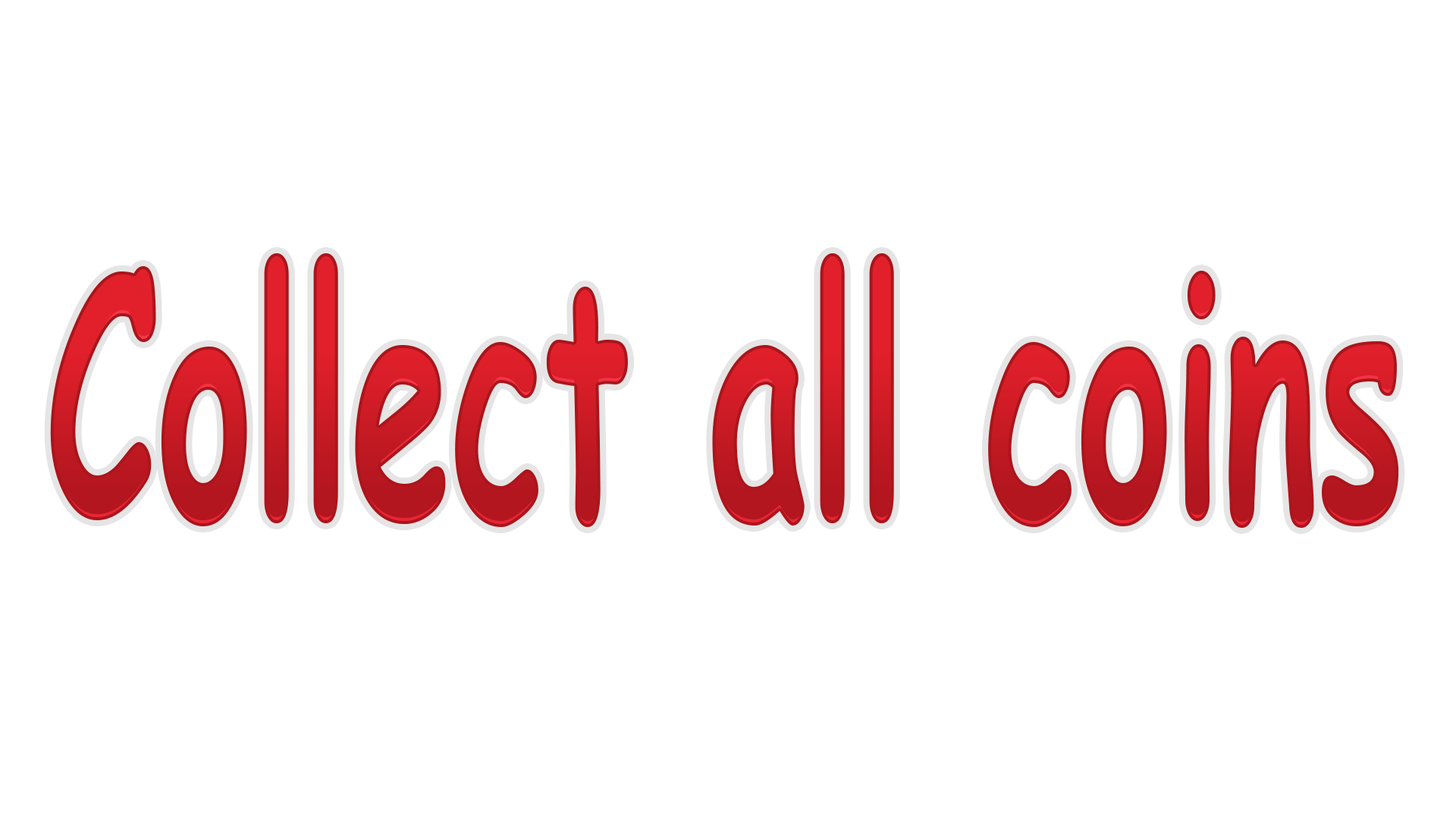
<style>
.page{position:relative;width:1456px;height:819px;background:#ffffff}
.page>*{position:absolute;margin:0}
.t1{font:335.6px "ComicSansMS-Bold";scale:0.54 1}
</style>
<div class="page">
<p class="t1" style="left:50px;top:253px;width:1349px;height:275px">Collect all coins</p>
</div>
